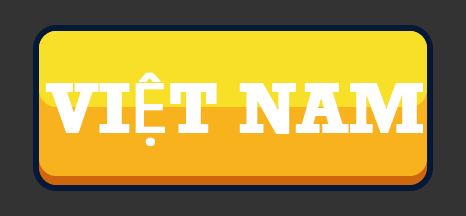
<style>
.page{position:relative;width:466px;height:216px;background:#333333}
.page>*{position:absolute;margin:0}
.t1{font:72px "Rockwell-Bold";color:#ffffff;text-transform:uppercase;font-weight:bold}
.t2{font:72px "MyriadPro-Regular";color:#ffffff;text-transform:uppercase;font-weight:bold}
</style>
<div class="page">
<p class="t1" style="left:45px;top:72px;width:378px;height:74px">vi<span class="t2">ệ</span>t nam</p>
</div>
